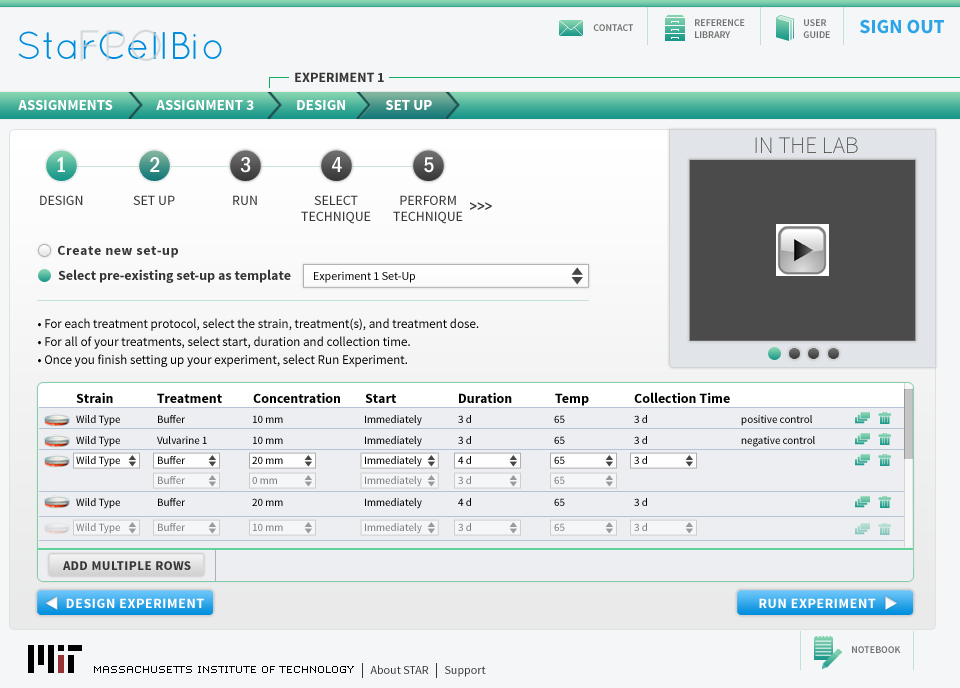
<style>
.page{position:relative;width:960px;height:688px;background:#f5f6f7}
.page>*{position:absolute;margin:0}
.t1{font:43.9px "QuicksandBook-Regular";color:#c7cfd3}
.t2{font:10px "SourceSansPro-Semibold";color:#727272}
.t3{font:20px "SourceSansPro-Bold";color:#2da4e8}
.t4{font:38.5px "QuicksandBook-Regular";color:#008ddd}
.t5{font:14px "SourceSansPro-Bold";color:#363636}
.t6{font:15px "SourceSansPro-Bold";color:#ffffff}
.t7{font:23.7px "SourceSansPro-ExtraLight";color:#363535}
.t8{font:21.9px "ITCFranklinGothicStd-MdCd";color:#ffffff}
.t9{font:14px "SourceSansPro-Regular";color:#363636}
.t10{font:14px/16px "SourceSansPro-Regular";color:#363636}
.t11{font:15px "ITCFranklinGothicStd-MdCd";color:#363636}
.t12{font:14px "SourceSansPro-Bold";letter-spacing:0.04em;color:#363636}
.t13{font:12px "SourceSansPro-Regular";color:#000000}
.t14{font:13px/18px "SourceSansPro-Regular";color:#000000}
.t15{font:14px "SourceSansPro-Bold";color:#000000}
.t16{font:11px "SourceSansPro-Regular";color:#000000}
.t17{font:11px "SourceSansPro-Regular"}
.t18{font:11px "SourceSansPro-Regular";color:#7a7b7c}
.t19{font:13px "SourceSansPro-Bold";letter-spacing:0.04em;color:#363636;text-transform:uppercase}
.t20{font:14px "SourceSansPro-Bold";letter-spacing:0.04em;color:#ffffff}
.t21{font:12px "SourceSansPro-Regular";color:#363636}
</style>
<div class="page">
<p class="t1" style="left:80px;top:29px;width:81px;height:32px;opacity:0.75">FPO</p>
<p class="t2" style="left:593px;top:24px;width:40px;height:7px">CONTACT</p>
<p class="t2" style="left:695px;top:19px;width:50px;height:19px">REFERENCE<br>LIBRARY</p>
<p class="t2" style="left:803px;top:19px;width:27px;height:19px">USER<br>GUIDE</p>
<p class="t3" style="left:860px;top:19px;width:84px;height:15px">SIGN OUT</p>
<p class="t4" style="left:18px;top:31px;width:204px;height:28px">StarCellBio</p>
<p class="t5" style="left:295px;top:72px;width:89px;height:10px">EXPERIMENT 1</p>
<p class="t6" style="left:18px;top:100px;width:95px;height:10px">ASSIGNMENTS</p>
<p class="t6" style="left:156px;top:100px;width:98px;height:10px">ASSIGNMENT 3</p>
<p class="t6" style="left:297px;top:100px;width:48px;height:10px">DESIGN</p>
<p class="t6" style="left:386px;top:100px;width:46px;height:10px">SET UP</p>
<p class="t7" style="left:755px;top:137px;width:103px;height:16px">IN THE LAB</p>
<p class="t8" style="left:57px;top:157px;width:8px;height:15px">1</p>
<p class="t8" style="left:150px;top:157px;width:10px;height:15px">2</p>
<p class="t8" style="left:240px;top:157px;width:11px;height:16px">3</p>
<p class="t8" style="left:332px;top:157px;width:10px;height:15px">4</p>
<p class="t8" style="left:424px;top:157px;width:10px;height:16px">5</p>
<p class="t9" style="left:40px;top:195px;width:43px;height:10px">DESIGN</p>
<p class="t9" style="left:133px;top:195px;width:42px;height:10px">SET UP</p>
<p class="t9" style="left:233px;top:195px;width:24px;height:10px">RUN</p>
<p class="t10" style="left:301px;top:195px;width:70px;height:29px;text-align:center">SELECT<br>TECHNIQUE</p>
<p class="t10" style="left:393px;top:195px;width:70px;height:29px;text-align:center">PERFORM<br>TECHNIQUE</p>
<p class="t11" style="left:470px;top:202px;width:22px;height:8px">&gt;&gt;&gt;</p>
<p class="t12" style="left:58px;top:245px;width:120px;height:13px">Create new set-up</p>
<p class="t5" style="left:58px;top:269px;width:233px;height:14px">Select pre-existing set-up as template</p>
<p class="t13" style="left:314px;top:271px;width:101px;height:12px">Experiment 1 Set-Up</p>
<p class="t14" style="left:38px;top:318px;width:441px;height:49px">• For each treatment protocol, select the strain, treatment(s), and treatment dose.<br>• For all of your treatments, select start, duration and collection time.<br>• Once you finish setting up your experiment, select Run Experiment.</p>
<p class="t15" style="left:76px;top:392px;width:37px;height:11px">Strain</p>
<p class="t15" style="left:157px;top:393px;width:65px;height:10px">Treatment</p>
<p class="t15" style="left:253px;top:392px;width:87px;height:11px">Concentration</p>
<p class="t15" style="left:365px;top:393px;width:31px;height:10px">Start</p>
<p class="t15" style="left:459px;top:392px;width:53px;height:11px">Duration</p>
<p class="t15" style="left:555px;top:393px;width:34px;height:13px">Temp</p>
<p class="t15" style="left:634px;top:392px;width:96px;height:11px">Collection Time</p>
<p class="t16" style="left:76px;top:415px;width:44px;height:11px">Wild Type</p>
<p class="t16" style="left:158px;top:415px;width:27px;height:8px">Buffer</p>
<p class="t16" style="left:253px;top:415px;width:30px;height:8px">10 mm</p>
<p class="t16" style="left:365px;top:415px;width:57px;height:11px">Immediately</p>
<p class="t16" style="left:458px;top:415px;width:13px;height:8px">3 d</p>
<p class="t17" style="left:554px;top:415px;width:11px;height:8px">65</p>
<p class="t16" style="left:634px;top:415px;width:13px;height:8px">3 d</p>
<p class="t16" style="left:741px;top:415px;width:71px;height:11px">positive control</p>
<p class="t16" style="left:76px;top:436px;width:44px;height:11px">Wild Type</p>
<p class="t16" style="left:157px;top:436px;width:50px;height:8px">Vulvarine 1</p>
<p class="t16" style="left:253px;top:436px;width:30px;height:8px">10 mm</p>
<p class="t16" style="left:365px;top:436px;width:57px;height:11px">Immediately</p>
<p class="t16" style="left:458px;top:436px;width:13px;height:8px">3 d</p>
<p class="t17" style="left:554px;top:436px;width:11px;height:8px">65</p>
<p class="t16" style="left:634px;top:436px;width:13px;height:8px">3 d</p>
<p class="t16" style="left:741px;top:436px;width:74px;height:11px">negative control</p>
<p class="t16" style="left:76px;top:456px;width:44px;height:11px">Wild Type</p>
<p class="t16" style="left:158px;top:456px;width:27px;height:8px">Buffer</p>
<p class="t16" style="left:252px;top:456px;width:31px;height:8px">20 mm</p>
<p class="t16" style="left:365px;top:456px;width:57px;height:11px">Immediately</p>
<p class="t16" style="left:458px;top:456px;width:13px;height:8px">4 d</p>
<p class="t17" style="left:554px;top:456px;width:11px;height:8px">65</p>
<p class="t16" style="left:634px;top:456px;width:13px;height:8px">3 d</p>
<p class="t18" style="left:158px;top:476px;width:27px;height:8px">Buffer</p>
<p class="t18" style="left:252px;top:476px;width:25px;height:8px">0 mm</p>
<p class="t18" style="left:365px;top:476px;width:57px;height:11px">Immediately</p>
<p class="t18" style="left:458px;top:476px;width:13px;height:8px">3 d</p>
<p class="t17" style="left:554px;top:476px;width:11px;height:8px">65</p>
<p class="t16" style="left:76px;top:498px;width:44px;height:11px">Wild Type</p>
<p class="t16" style="left:158px;top:498px;width:27px;height:8px">Buffer</p>
<p class="t16" style="left:252px;top:498px;width:31px;height:8px">20 mm</p>
<p class="t16" style="left:365px;top:498px;width:57px;height:11px">Immediately</p>
<p class="t16" style="left:458px;top:498px;width:13px;height:8px">4 d</p>
<p class="t17" style="left:554px;top:498px;width:11px;height:8px">65</p>
<p class="t16" style="left:634px;top:498px;width:13px;height:8px">3 d</p>
<p class="t18" style="left:76px;top:523px;width:44px;height:11px">Wild Type</p>
<p class="t18" style="left:158px;top:523px;width:27px;height:8px">Buffer</p>
<p class="t18" style="left:253px;top:523px;width:30px;height:8px">10 mm</p>
<p class="t18" style="left:365px;top:523px;width:57px;height:11px">Immediately</p>
<p class="t18" style="left:458px;top:523px;width:13px;height:8px">3 d</p>
<p class="t17" style="left:554px;top:523px;width:11px;height:8px">65</p>
<p class="t18" style="left:634px;top:523px;width:13px;height:8px">3 d</p>
<p class="t19" style="left:63px;top:561px;width:128px;height:9px">Add Multiple Rows</p>
<p class="t20" style="left:66px;top:598px;width:138px;height:10px">DESIGN EXPERIMENT</p>
<p class="t20" style="left:759px;top:598px;width:117px;height:10px">RUN EXPERIMENT</p>
<p class="t2" style="left:852px;top:646px;width:49px;height:7px">NOTEBOOK</p>
<p class="t21" style="left:370px;top:665px;width:59px;height:9px">About STAR</p>
<p class="t21" style="left:445px;top:666px;width:41px;height:11px">Support</p>
</div>
